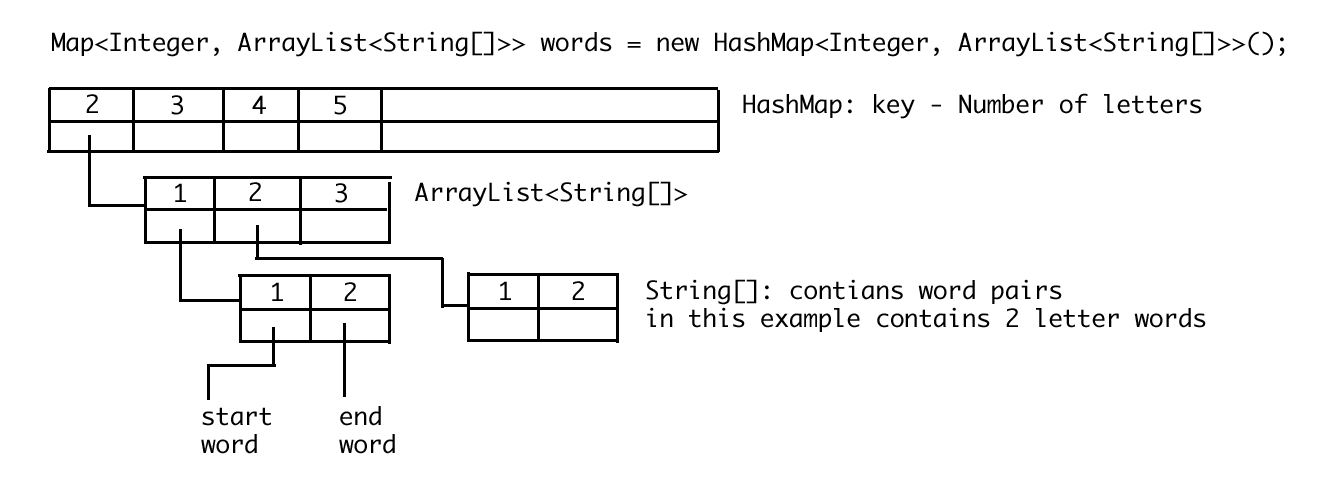
<style>
.page{position:relative;width:1319px;height:487px;background:#ffffff}
.page>*{position:absolute;margin:0}
.t1{font:24px "Monaco";color:#000000}
.t2{font:24px/28px "Monaco";color:#000000}
</style>
<div class="page">
<p class="t1" style="left:52px;top:31px;width:1233px;height:26px">Map&lt;Integer, ArrayList&lt;String[]&gt;&gt; words = new HashMap&lt;Integer, ArrayList&lt;String[]&gt;&gt;();</p>
<p class="t1" style="left:86px;top:94px;width:12px;height:19px">2</p>
<p class="t1" style="left:171px;top:95px;width:12px;height:20px">3</p>
<p class="t1" style="left:252px;top:95px;width:14px;height:19px">4</p>
<p class="t1" style="left:334px;top:95px;width:12px;height:20px">5</p>
<p class="t1" style="left:743px;top:93px;width:459px;height:26px">HashMap: key - Number of letters</p>
<p class="t1" style="left:175px;top:183px;width:11px;height:19px">1</p>
<p class="t1" style="left:249px;top:182px;width:12px;height:19px">2</p>
<p class="t1" style="left:335px;top:183px;width:12px;height:20px">3</p>
<p class="t1" style="left:415px;top:181px;width:273px;height:26px">ArrayList&lt;String[]&gt;</p>
<p class="t2" style="left:646px;top:279px;width:560px;height:53px">String[]: contians word pairs<br>in this example contains 2 letter words</p>
<p class="t1" style="left:272px;top:282px;width:11px;height:19px">1</p>
<p class="t1" style="left:344px;top:282px;width:12px;height:19px">2</p>
<p class="t2" style="left:201px;top:407px;width:70px;height:47px">start<br>word</p>
<p class="t2" style="left:339px;top:406px;width:56px;height:48px">end<br>word</p>
</div>
